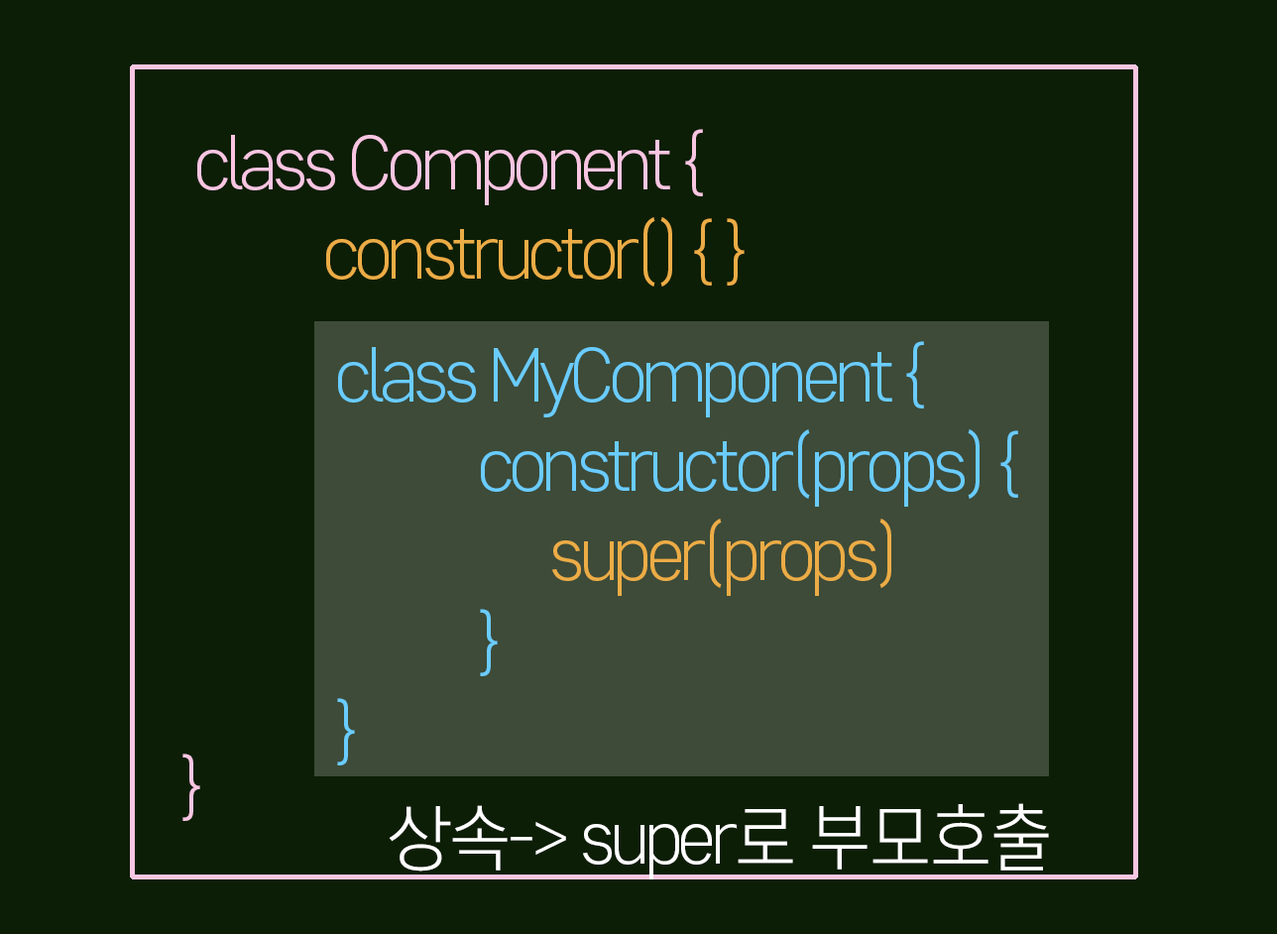
<style>
.page{position:relative;width:1277px;height:934px;background:#0d1e06}
.page>*{position:absolute;margin:0}
.t1{font:71.4px/89.2px "CoreGothicD-3Light";letter-spacing:-0.075em;color:#f9c6e2}
.t2{font:71.4px/89.2px "CoreGothicD-3Light";letter-spacing:-0.075em;color:#ecac46}
.t3{font:71.4px/89.2px "CoreGothicD-3Light";letter-spacing:-0.075em;color:#6accff}
.t4{font:71.4px "CoreGothicD-3Light";letter-spacing:-0.075em;color:#ffffff}
</style>
<div class="page">
<p class="t1" style="left:182px;top:129px;width:563px;height:692px">class Component {<br>    <span class="t2">constructor() { }<br></span><br><br><br><br><br>}</p>
<p class="t3" style="left:337px;top:341px;width:681px;height:424px">class MyComponent {<br>    constructor(props) { <br>      <span class="t2">super(props)<br></span>    }<br>}</p>
<p class="t4" style="left:389px;top:803px;width:660px;height:76px">상속-&gt; super로 부모호출</p>
</div>
